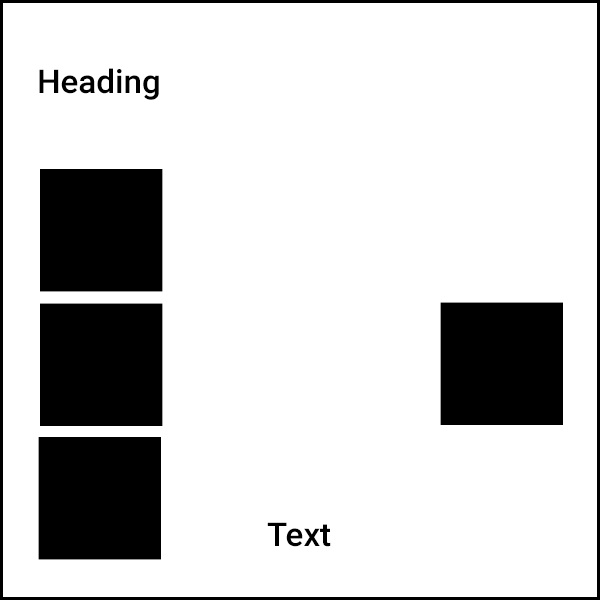
<style>
.page{position:relative;width:600px;height:600px;background:#ffffff}
.page>*{position:absolute;margin:0}
.t1{font:32.8px "Roboto-Medium";color:#000000}
</style>
<div class="page">
<p class="t1" style="left:39px;top:68px;width:120px;height:32px">Heading</p>
<p class="t1" style="left:267px;top:522px;width:64px;height:25px">Text</p>
</div>
